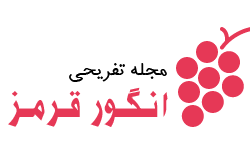
<style>
.page{position:relative;width:250px;height:150px;background:#ffffff}
.page>*{position:absolute;margin:0}
.t1{font:30px "ASade";color:#000000}
.t2{font:48px "BKourosh";color:#e63856}
</style>
<div class="page">
<p class="t1" style="left:69px;top:63px;width:98px;height:19px">مجله تفریحی</p>
<p class="t2" style="left:8px;top:87px;width:160px;height:40px">انـگـور قـرمـز</p>
</div>
